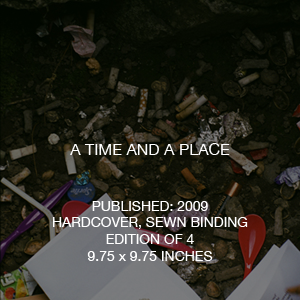
<style>
.page{position:relative;width:300px;height:300px}
.page>*{position:absolute;margin:0}
.t1{font:14px "HelveticaNeue";color:#ffffff}
.t2{font:16px "HelveticaNeue";color:#ffffff}
</style>
<div class="page">
<p class="t1" style="left:53px;top:143px;width:195px;height:118px;text-align:center"><span class="t2">A TIME AND A PLACE<br><br><br></span>PUBLISHED: 2009<br>HARDCOVER, SEWN BINDING<br>EDITION OF 4<br>9.75 x 9.75 INCHES</p>
</div>
